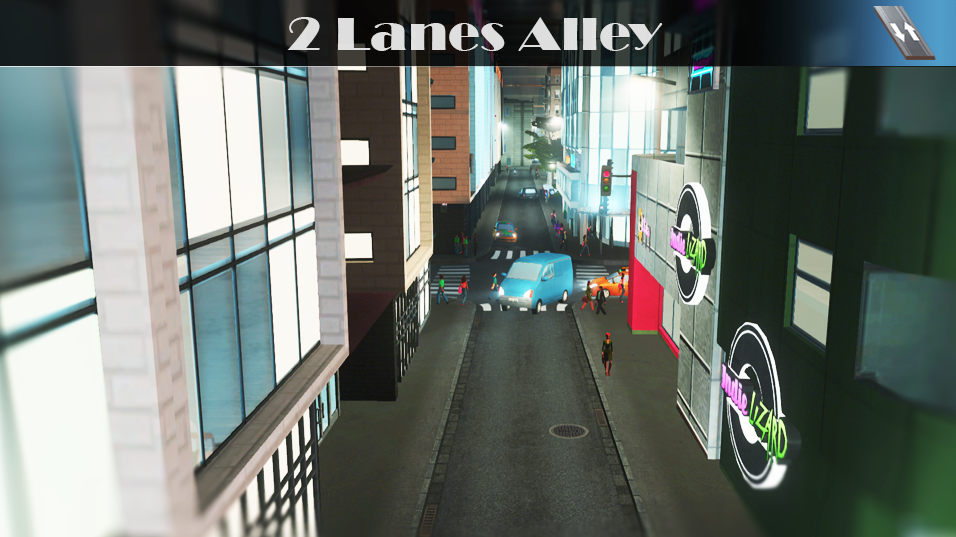
<style>
.page{position:relative;width:956px;height:537px}
.page>*{position:absolute;margin:0}
.t1{font:48px "Broadway";color:#dedede;scale:1.11 1}
</style>
<div class="page">
<p class="t1" style="left:287px;top:17px;width:376px;height:34px">2 Lanes Alley</p>
</div>
